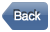
<style>
.page{position:relative;width:50px;height:32px;background:#ffffff}
.page>*{position:absolute;margin:0}
.t1{font:12px "Helvetica";letter-spacing:0.001em;color:#ffffff;font-weight:bold}
</style>
<div class="page">
<p class="t1" style="left:14px;top:11px;width:27px;height:10px">Back</p>
</div>
